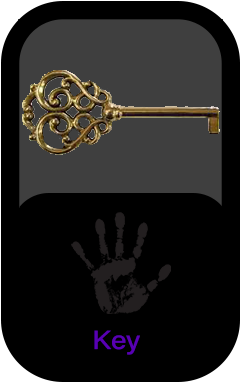
<style>
.page{position:relative;width:241px;height:383px;background:#000000}
.page>*{position:absolute;margin:0}
.t1{font:26.3px "AcuminConcept-Medium";color:#5800b3;scale:1.11 1}
</style>
<div class="page">
<p class="t1" style="left:94px;top:330px;width:46px;height:25px">Key</p>
</div>
